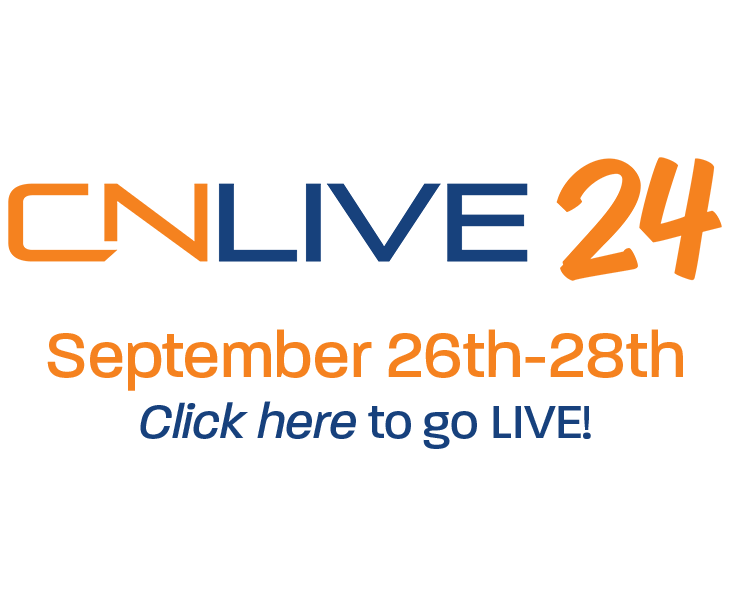
<style>
.page{position:relative;width:730px;height:605px;background:#ffffff}
.page>*{position:absolute;margin:0}
.t1{font:66.7px "Paralucent-Medium";color:#f5821f}
.t2{font:50px "Paralucent-Medium";color:#17417d}
.t3{font:50px "Paralucent-MediumItalic";color:#17417d}
</style>
<div class="page">
<p class="t1" style="left:47px;top:329px;width:636px;height:62px">September 26th-28th</p>
<p class="t2" style="left:140px;top:401px;width:451px;height:48px"><span class="t3">Click here</span> to go LIVE!</p>
</div>
